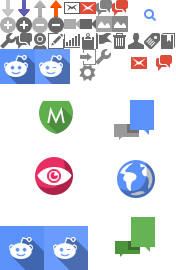
<style>
.page{position:relative;width:176px;height:270px;background:#ffffff}
.page>*{position:absolute;margin:0}
.t1{font:20px "FuturaLT-Book";color:#ffffff}
</style>
<div class="page">
<p class="t1" style="left:47px;top:107px;width:18px;height:17px">M</p>
</div>
